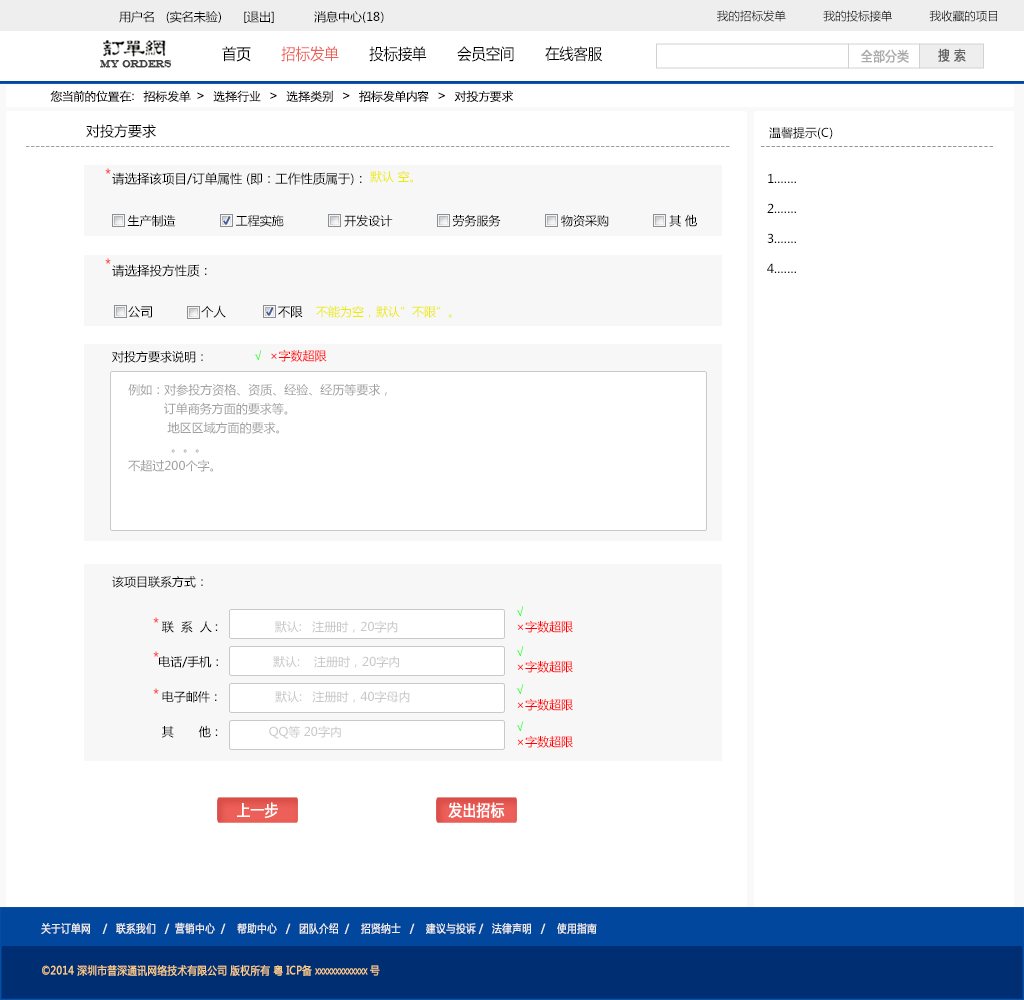
<style>
.page{position:relative;width:1024px;height:1000px;background:#ffffff}
.page>*{position:absolute;margin:0}
.t1{font:12px "MicrosoftYaHei";color:#000000}
.t2{font:11.5px "MicrosoftYaHei";color:#000000}
.t3{font:15.4px "MicrosoftYaHei";color:#000000;font-variant:small-caps;scale:0.94 1}
.t4{font:15.4px "MicrosoftYaHei";color:#ed6059;font-variant:small-caps;scale:0.94 1}
.t5{font:13.2px "MicrosoftYaHei";color:#aaaaaa;font-variant:small-caps;font-weight:bold;scale:0.86 1}
.t6{font:13.2px "MicrosoftYaHei";color:#626262;font-variant:small-caps;font-weight:bold;scale:0.86 1}
.t7{font:9.9px "EngraversMT";color:#434343;font-variant:small-caps;font-weight:bold;scale:0.86 1}
.t8{font:12px "STXihei";color:#060606;scale:1.04 1}
.t9{font:14px "MicrosoftYaHei";color:#000000}
.t10{font:12px "MicrosoftYaHei";color:#a0a0a0}
.t11{font:12px "MicrosoftYaHei";color:#959595}
.t12{font:14px "MicrosoftYaHei"}
.t13{font:12.5px "MicrosoftYaHei";color:#000000}
.t14{font:12px "MicrosoftYaHei";color:#ebeb00}
.t15{font:12px/30px "MicrosoftYaHei";color:#000000}
.t16{font:13.5px "MicrosoftYaHei";color:#000000}
.t17{font:12px/45px "MicrosoftYaHei";color:#000000}
.t18{font:11.5px/30px "STXihei";color:#000000}
.t19{font:12px/35px "MicrosoftYaHei";color:#000000}
.t20{font:12px/35px "MicrosoftYaHei";color:#c8c8c8}
.t21{font:12px/30px "MicrosoftYaHei";color:#c8c8c8}
.t22{font:12px "MicrosoftYaHei";color:#ff0000}
.t23{font:12px/19px "MicrosoftYaHei";color:#a0a0a0}
.t24{font:12px/15px "MicrosoftYaHei";color:#ff0000}
.t25{font:12px/15px "MicrosoftYaHei";color:#00ff00}
.t26{font:15.4px "MicrosoftYaHei";color:#ffffff;font-variant:small-caps;font-weight:bold;scale:0.86 1}
.t27{font:11px "MicrosoftYaHei";color:#eeeeee;font-variant:small-caps;font-weight:bold;scale:0.86 1}
.t28{font:15.4px "STXihei";color:#eeeeee;font-variant:small-caps;font-weight:bold;scale:0.86 1}
.t29{font:11px "MicrosoftYaHei";color:#facd89;font-variant:small-caps;font-weight:bold;scale:0.87 1}
.t30{font:11px "MicrosoftYaHei";color:#eeeeee;font-variant:small-caps;font-weight:bold;scale:0.87 1}
</style>
<div class="page">
<p class="t1" style="left:119px;top:11px;width:265px;height:12px">用户名   (实名未验)      [退出]           消息中心(18)</p>
<p class="t2" style="left:717px;top:10px;width:280px;height:12px">我的招标发单           我的投标接单           我收藏的项目</p>
<p class="t3" style="left:222px;top:46px;width:381px;height:16px">首页       <span class="t4">招标发单 </span>      投标接单       会员空间       在线客服</p>
<p class="t5" style="left:861px;top:49px;width:48px;height:14px">全部分类</p>
<p class="t6" style="left:938px;top:48px;width:28px;height:14px">搜 索</p>
<p class="t7" style="left:100px;top:60px;width:72px;height:8px">MY ORDERS</p>
<p class="t8" style="left:50px;top:90px;width:464px;height:12px">您当前的位置在：  招标发单  &gt;   选择行业   &gt;   选择类别   &gt;   招标发单内容   &gt;   对投方要求</p>
<p class="t9" style="left:86px;top:124px;width:70px;height:14px">对投方要求</p>
<p class="t1" style="left:769px;top:127px;width:64px;height:12px">温馨提示(C)</p>
<p class="t10" style="left:26px;top:146px;width:704px;height:1px">---------------------------------------------------------------------------------------------------------------------------------------------</p>
<p class="t11" style="left:761px;top:146px;width:232px;height:1px">---------------------------------------------</p>
<p class="t12" style="left:105px;top:168px;width:6px;height:6px">*</p>
<p class="t13" style="left:112px;top:172px;width:250px;height:13px">请选择该项目/订单属性 (即：工作性质属于)：</p>
<p class="t14" style="left:370px;top:171px;width:43px;height:12px">默认 空。</p>
<p class="t15" style="left:767px;top:173px;width:29px;height:100px">1.……<br>2.……<br>3.……<br>4.……</p>
<p class="t1" style="left:127px;top:214px;width:570px;height:13px"><span class="t16"><br></span>生产制造                 工程实施                 开发设计                 劳务服务                 物资采购                 其 他</p>
<p class="t12" style="left:105px;top:258px;width:6px;height:6px">*</p>
<p class="t13" style="left:112px;top:264px;width:95px;height:13px">请选择投方性质：</p>
<p class="t13" style="left:128px;top:305px;width:175px;height:13px">公司             个人              不限</p>
<p class="t14" style="left:316px;top:305px;width:136px;height:13px">不能为空，默认”不限”。</p>
<p class="t17" style="left:112px;top:351px;width:298px;height:388px"><span class="t18"><br></span><br><br><br><br><br>对投方要求说明：<br><br><br><br><br>该项目联系方式：<br>             <span class="t19"> 联  系  人 :                </span><span class="t20">默认:   注册时，20字内<br></span><span class="t19">             电话/手机：              </span><span class="t20">默认:    注册时，20字内<br></span><span class="t19">              电子邮件：               </span><span class="t20">默认:   注册时，40字母内<br></span><span class="t19">              其       他：             </span><span class="t21">QQ等 20字内</span></p>
<p class="t22" style="left:254px;top:349px;width:73px;height:13px">√  ×字数超限</p>
<p class="t23" style="left:128px;top:383px;width:259px;height:89px">例如：对参投方资格、资质、经验、经历等要求，<br>          订单商务方面的要求等。<br>           地区区域方面的要求。<br>            。。。<br>不超过200个字。</p>
<p class="t24" style="left:516px;top:606px;width:57px;height:27px"><span class="t25">√<br></span>×字数超限</p>
<p class="t12" style="left:153px;top:617px;width:6px;height:6px">*</p>
<p class="t12" style="left:153px;top:651px;width:6px;height:6px">*</p>
<p class="t24" style="left:516px;top:646px;width:57px;height:27px"><span class="t25">√<br></span>×字数超限</p>
<p class="t12" style="left:153px;top:688px;width:6px;height:6px">*</p>
<p class="t24" style="left:516px;top:684px;width:57px;height:27px"><span class="t25">√<br></span>×字数超限</p>
<p class="t24" style="left:516px;top:721px;width:57px;height:27px"><span class="t25">√<br></span>×字数超限</p>
<p class="t26" style="left:237px;top:802px;width:41px;height:16px">上一步</p>
<p class="t26" style="left:448px;top:802px;width:57px;height:16px">发出招标</p>
<p class="t27" style="left:41px;top:922px;width:556px;height:12px"><span class="t28"><br><br></span>关于订单网    /   联系我们   /  营销中心  /    帮助中心   /   团队介绍  /    招贤纳士   /    建议与投诉 /   法律声明   /    使用指南</p>
<p class="t29" style="left:42px;top:965px;width:338px;height:11px"><span class="t30"> </span>©2014 深圳市普深通讯网络技术有限公司 版权所有 粤 ICP备 xxxxxxxxxxxxx 号</p>
</div>
